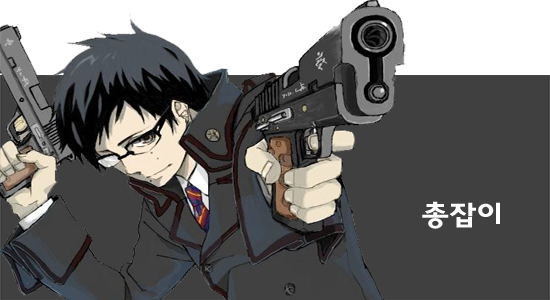
<style>
.page{position:relative;width:550px;height:300px;background:#404040}
.page>*{position:absolute;margin:0}
.t1{font:27px "HaanYGodic25";color:#ffffff;scale:1.13 1}
</style>
<div class="page">
<p class="t1" style="left:422px;top:201px;width:78px;height:28px">총잡이</p>
</div>
